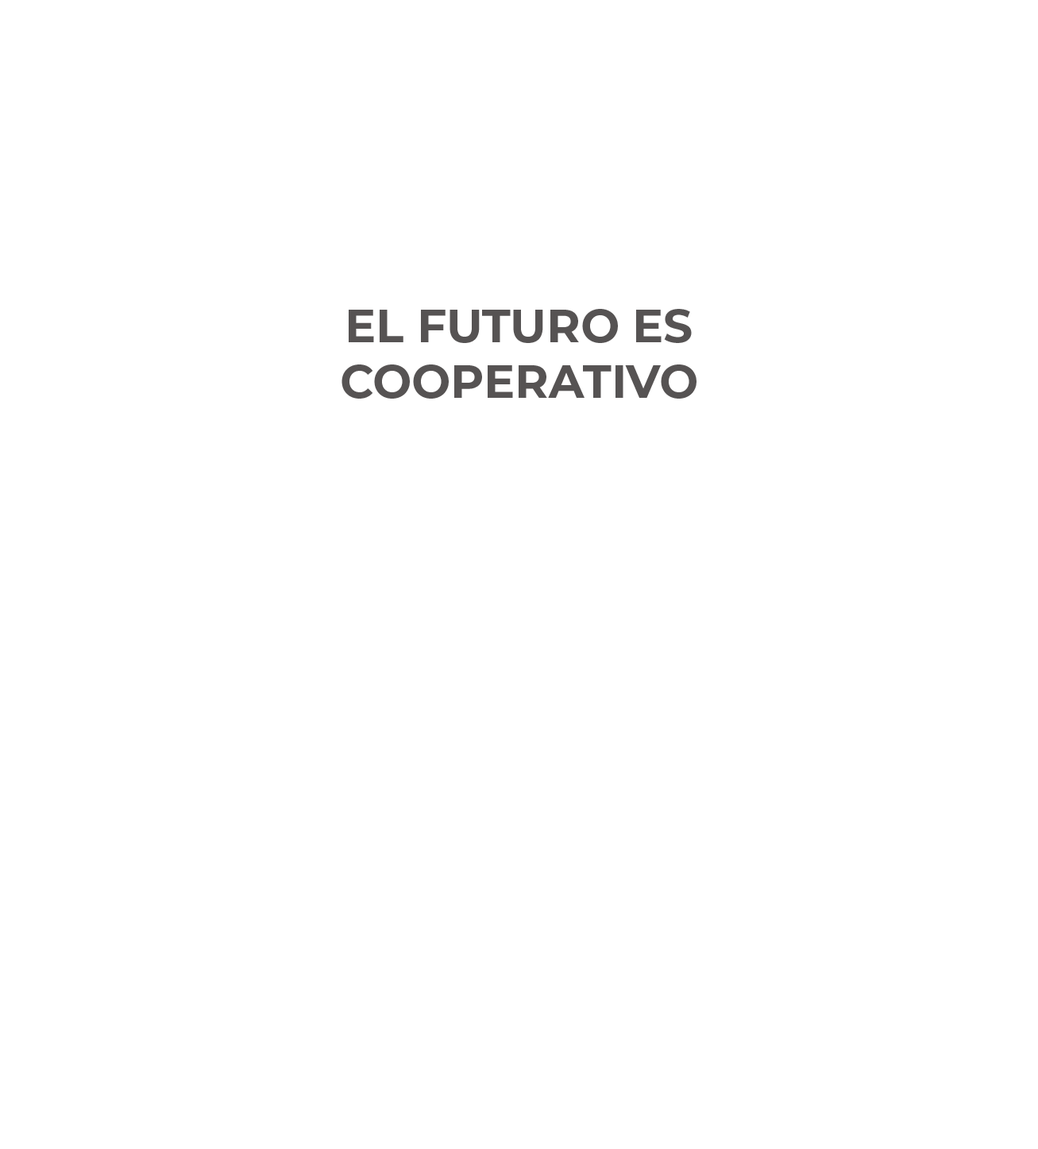
<style>
.page{position:relative;width:1038px;height:1149px;background:#ffffff}
.page>*{position:absolute;margin:0}
.t1{font:46.2px "Montserrat-Bold";color:#565353}
</style>
<div class="page">
<p class="t1" style="left:341px;top:309px;width:355px;height:90px;text-align:center">EL FUTURO ES<br>COOPERATIVO</p>
</div>
